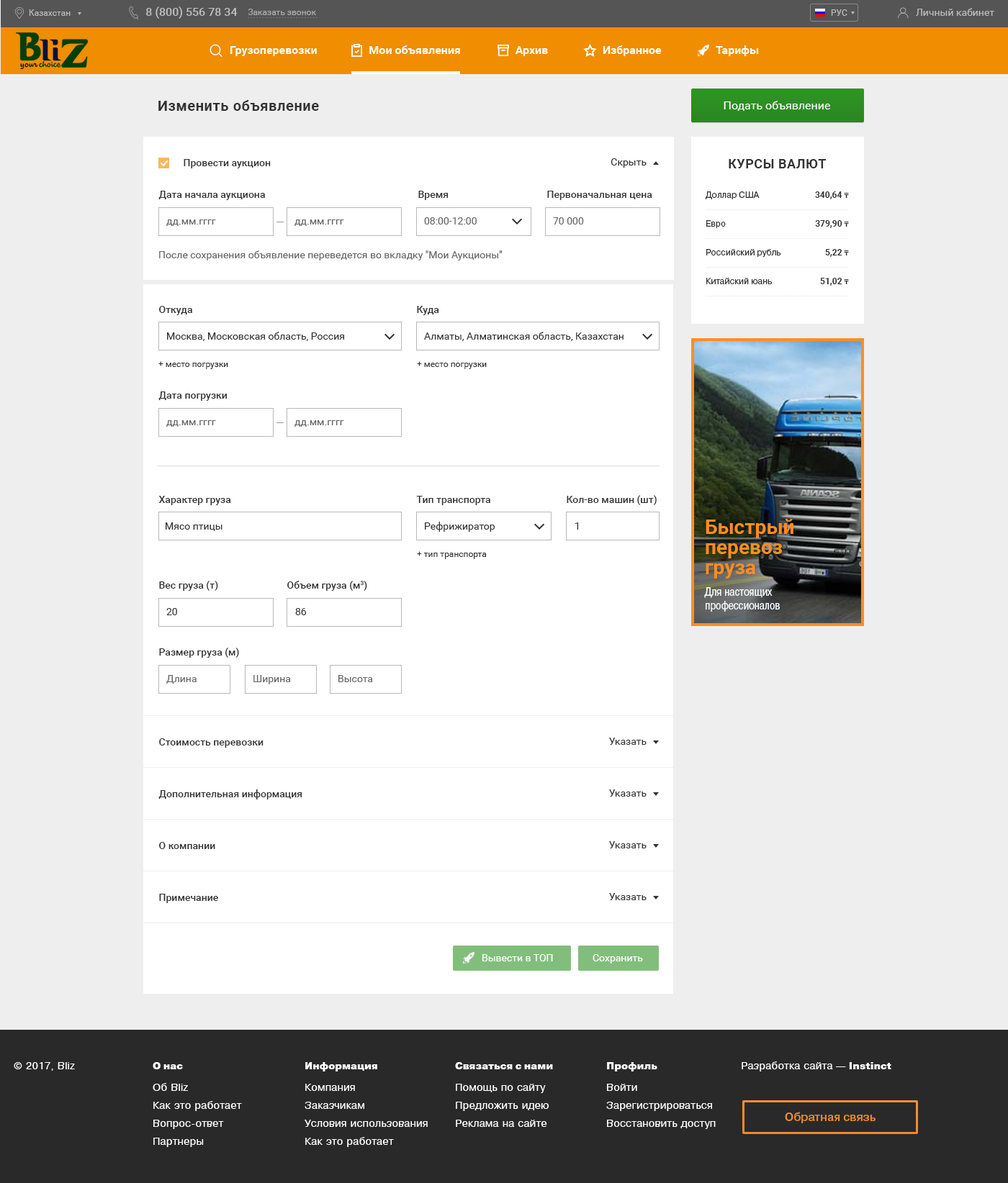
<style>
.page{position:relative;width:1008px;height:1183px;background:#ffffff}
.page>*{position:absolute;margin:0}
.t1{font:14.4px "Roboto-Bold";letter-spacing:0.03em;color:#333333}
.t2{font:11.5px "Roboto-Regular";color:#ffffff}
.t3{font:10.1px "Roboto-Medium";color:#333333}
.t4{font:10.1px "Roboto-Regular";color:#333333}
.t5{font:13px "Roboto-Bold";letter-spacing:0.03em;color:#333333;text-transform:uppercase}
.t6{font:8.6px/28.8px "PragmaticaBook-Reg";color:#333333}
.t7{font:10.1px/28.8px "PragmaticaBlack";letter-spacing:0.03em;color:#333333;text-transform:uppercase}
.t8{font:8.6px/28.8px "Roboto-Bold";color:#303030}
.t9{font:7.2px/28.8px "TimesNewRomanPS-BoldMT";color:#303030}
.t10{font:10.1px "Roboto-Regular";color:#666666}
.t11{font:8.6px "Roboto-Regular";color:#333333}
.t12{font:10.1px "Roboto-Regular";color:#ffffff}
</style>
<div class="page">
<p class="t1" style="left:158px;top:100px;width:161px;height:11px">Изменить объявление</p>
<p class="t2" style="left:723px;top:101px;width:107px;height:10px">Подать объявление</p>
<p class="t3" style="left:184px;top:159px;width:87px;height:9px">Провести аукцион</p>
<p class="t4" style="left:610px;top:158px;width:36px;height:10px">Скрыть</p>
<p class="t5" style="left:728px;top:159px;width:98px;height:9px">Курсы валют</p>
<p class="t3" style="left:158px;top:191px;width:107px;height:9px">Дата начала аукциона</p>
<p class="t3" style="left:418px;top:191px;width:30px;height:9px">Время</p>
<p class="t3" style="left:547px;top:191px;width:105px;height:9px">Первоначальная цена</p>
<p class="t6" style="left:705px;top:191px;width:76px;height:93px;text-align:center"><span class="t7"><br></span>Доллар США<br>Евро<br>Российский рубль<br>Китайский юань</p>
<p class="t8" style="left:815px;top:191px;width:34px;height:95px;text-align:right">340,64 <span class="t9">₸<br></span>379,90 <span class="t9">₸<br></span>5,22 <span class="t9">₸<br></span>51,02 <span class="t9">₸</span></p>
<p class="t10" style="left:166px;top:220px;width:50px;height:6px">дд.мм.гггг</p>
<p class="t10" style="left:294px;top:220px;width:50px;height:6px">дд.мм.гггг</p>
<p class="t10" style="left:424px;top:217px;width:52px;height:8px">08:00-12:00</p>
<p class="t10" style="left:553px;top:217px;width:31px;height:8px">70 000</p>
<p class="t10" style="left:159px;top:250px;width:343px;height:11px">После сохранения объявление переведется во вкладку "Мои Аукционы"</p>
<p class="t3" style="left:159px;top:306px;width:33px;height:9px">Откуда</p>
<p class="t3" style="left:417px;top:306px;width:22px;height:9px">Куда</p>
<p class="t4" style="left:167px;top:332px;width:177px;height:9px">Москва, Московская область, Россия</p>
<p class="t4" style="left:424px;top:332px;width:199px;height:9px">Алматы, Алматинская область, Казахстан</p>
<p class="t11" style="left:158px;top:361px;width:70px;height:8px">+ место погрузки</p>
<p class="t11" style="left:417px;top:361px;width:70px;height:8px">+ место погрузки</p>
<p class="t3" style="left:158px;top:392px;width:69px;height:9px">Дата погрузки</p>
<p class="t10" style="left:166px;top:420px;width:50px;height:7px">дд.мм.гггг</p>
<p class="t10" style="left:294px;top:420px;width:50px;height:7px">дд.мм.гггг</p>
<p class="t3" style="left:158px;top:496px;width:73px;height:9px">Характер груза</p>
<p class="t3" style="left:416px;top:496px;width:74px;height:9px">Тип транспорта</p>
<p class="t3" style="left:566px;top:495px;width:90px;height:10px">Кол-во машин (шт)</p>
<p class="t4" style="left:425px;top:522px;width:70px;height:10px">Рефрижиратор</p>
<p class="t4" style="left:166px;top:523px;width:56px;height:8px">Мясо птицы</p>
<p class="t4" style="left:575px;top:523px;width:4px;height:7px">1</p>
<p class="t11" style="left:417px;top:551px;width:70px;height:8px">+ тип транспорта</p>
<p class="t3" style="left:159px;top:581px;width:59px;height:10px">Вес груза (т)</p>
<p class="t3" style="left:287px;top:581px;width:80px;height:10px">Объем груза (м3)</p>
<p class="t4" style="left:166px;top:608px;width:11px;height:7px">20</p>
<p class="t4" style="left:295px;top:608px;width:12px;height:7px">86</p>
<p class="t3" style="left:159px;top:648px;width:80px;height:10px">Размер груза (м)</p>
<p class="t10" style="left:166px;top:675px;width:31px;height:9px">Длина</p>
<p class="t10" style="left:253px;top:675px;width:38px;height:10px">Ширина</p>
<p class="t10" style="left:338px;top:675px;width:35px;height:7px">Высота</p>
<p class="t4" style="left:609px;top:738px;width:37px;height:7px">Указать</p>
<p class="t3" style="left:159px;top:738px;width:104px;height:10px">Стоимость перевозки</p>
<p class="t3" style="left:158px;top:790px;width:144px;height:10px">Дополнительная информация</p>
<p class="t4" style="left:609px;top:790px;width:37px;height:7px">Указать</p>
<p class="t3" style="left:159px;top:842px;width:56px;height:7px">О компании</p>
<p class="t4" style="left:609px;top:841px;width:37px;height:8px">Указать</p>
<p class="t3" style="left:159px;top:894px;width:59px;height:9px">Примечание</p>
<p class="t4" style="left:609px;top:893px;width:37px;height:7px">Указать</p>
<p class="t12" style="left:482px;top:954px;width:71px;height:8px">Вывести в ТОП</p>
<p class="t12" style="left:592px;top:954px;width:51px;height:10px">Сохранить</p>
</div>
